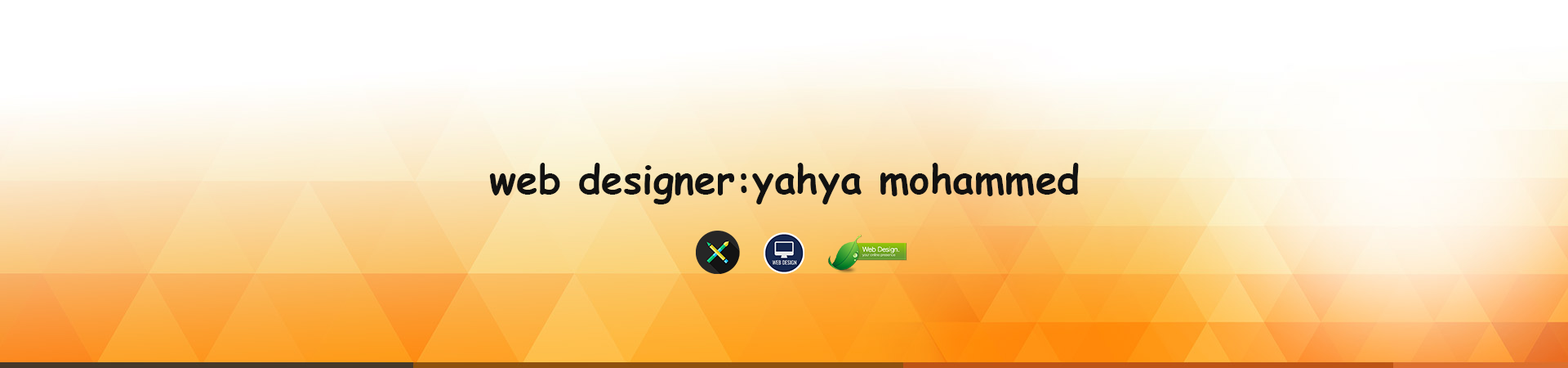
<style>
.page{position:relative;width:1568px;height:368px}
.page>*{position:absolute;margin:0}
.t1{font:39.2px "ComicSansMS-Bold";color:#111111}
</style>
<div class="page">
<p class="t1" style="left:489px;top:163px;width:590px;height:41px">web designer:yahya mohammed</p>
</div>
